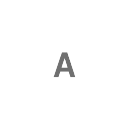
<style>
.page{position:relative;width:128px;height:128px;background:#ffffff}
.page>*{position:absolute;margin:0}
.t1{font:34.1px "Mina-Bold";color:#707070}
</style>
<div class="page">
<p class="t1" style="left:53px;top:52px;width:23px;height:26px">A</p>
</div>
